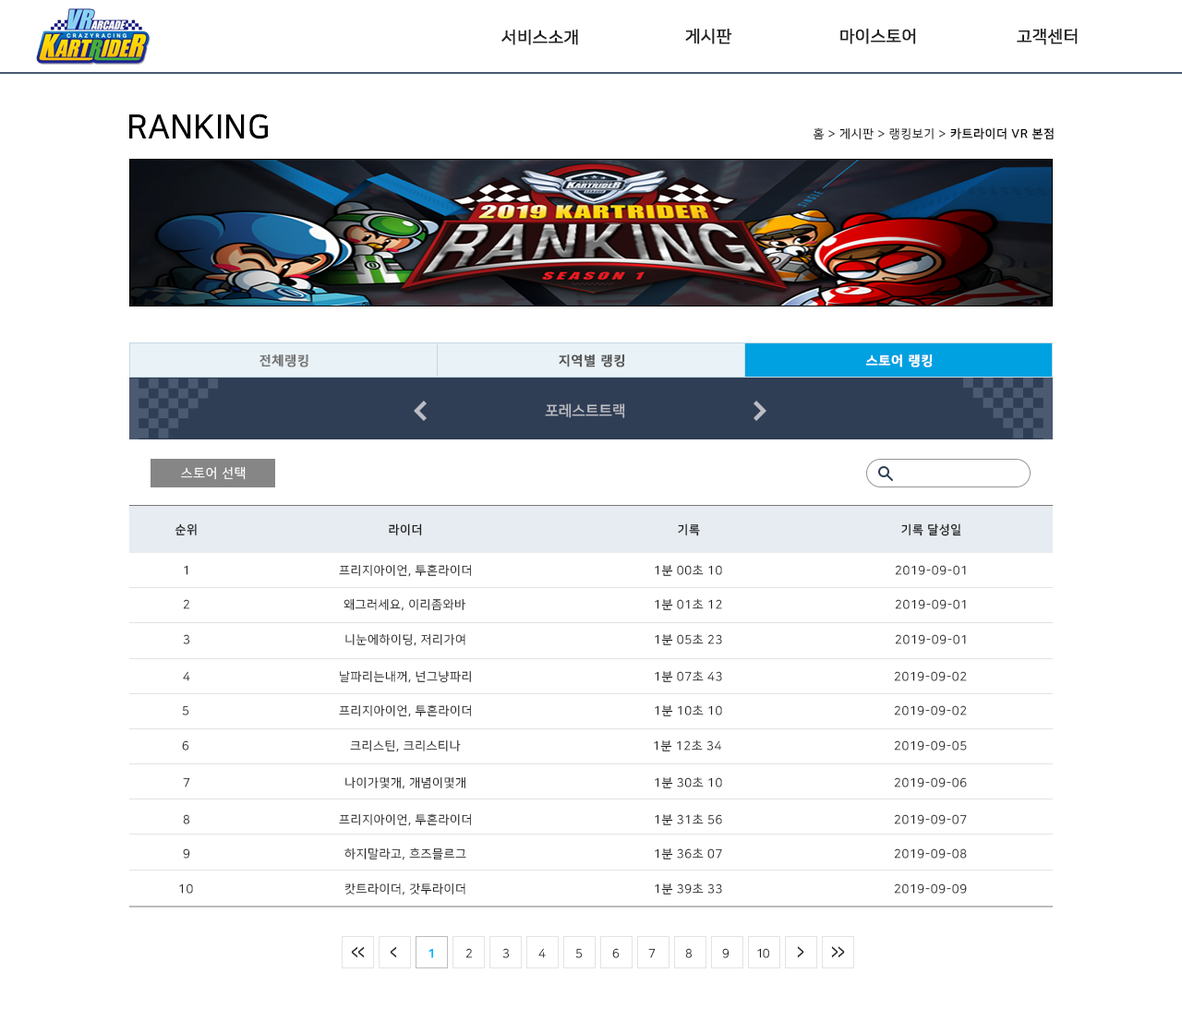
<style>
.page{position:relative;width:1182px;height:1009px;background:#ffffff}
.page>*{position:absolute;margin:0}
.t1{font:16.6px "NanumSquareR";color:#222222;font-weight:bold}
.t2{font:33.2px "NanumSquareB";color:#000000}
.t3{font:12px "NanumSquareR";letter-spacing:0.05em;color:#000000}
.t4{font:12px "NanumSquareB";letter-spacing:0.05em;color:#000000}
.t5{font:12.9px "NanumSquareB";letter-spacing:0.05em;color:#777777;font-weight:bold}
.t6{font:12.9px "NanumSquareB";letter-spacing:0.05em;color:#555555;font-weight:bold}
.t7{font:12.9px "NanumSquareB";letter-spacing:0.05em;color:#ffffff;font-weight:bold}
.t8{font:14.8px "NanumSquareB";color:#bcbcc4}
.t9{font:12.9px "NanumSquareR";letter-spacing:0.05em;color:#ffffff}
.t10{font:12px "NanumSquareB";letter-spacing:0.05em;color:#222222}
.t11{font:12px "NanumSquareR";letter-spacing:0.05em;color:#222222}
.t12{font:12px "NanumSquareR";letter-spacing:0.05em}
.t13{font:18.9px "NanumSquareB";letter-spacing:-0.075em;color:#222222;scale:0.63 1}
.t14{font:12px "NanumSquareB";letter-spacing:-0.075em;color:#00b6ff;font-weight:bold}
.t15{font:12px "NanumSquareR";letter-spacing:-0.075em}
.t16{font:12px "NanumSquareR";letter-spacing:-0.075em;color:#222222}
.t17{font:19.5px "NanumSquareB";letter-spacing:-0.075em;color:#222222;scale:0.61 1}
</style>
<div class="page">
<p class="t1" style="left:501px;top:29px;width:77px;height:16px">서비스소개</p>
<p class="t1" style="left:685px;top:28px;width:47px;height:16px">게시판</p>
<p class="t1" style="left:840px;top:28px;width:76px;height:16px">마이스토어</p>
<p class="t1" style="left:1016px;top:28px;width:61px;height:16px">고객센터</p>
<p class="t2" style="left:129px;top:114px;width:139px;height:25px">RANKING</p>
<p class="t3" style="left:812px;top:127px;width:241px;height:13px">홈 &gt; 게시판 &gt; 랭킹보기 &gt;<span class="t4"> 카트라이더 VR 본점</span></p>
<p class="t5" style="left:259px;top:354px;width:49px;height:13px">전체랭킹</p>
<p class="t6" style="left:559px;top:354px;width:66px;height:13px">지역별 랭킹</p>
<p class="t7" style="left:865px;top:354px;width:67px;height:13px">스토어 랭킹</p>
<p class="t8" style="left:545px;top:403px;width:80px;height:15px">포레스트트랙</p>
<p class="t9" style="left:181px;top:466px;width:65px;height:14px">스토어 선택</p>
<p class="t10" style="left:174px;top:523px;width:23px;height:12px">순위</p>
<p class="t10" style="left:389px;top:523px;width:33px;height:12px">라이더</p>
<p class="t10" style="left:678px;top:523px;width:22px;height:13px">기록</p>
<p class="t10" style="left:901px;top:523px;width:60px;height:13px">기록 달성일</p>
<p class="t11" style="left:184px;top:565px;width:4px;height:10px">1</p>
<p class="t11" style="left:339px;top:564px;width:132px;height:13px">프리지아이언, 투혼라이더</p>
<p class="t11" style="left:655px;top:564px;width:67px;height:12px">1분 00초 10</p>
<p class="t11" style="left:895px;top:565px;width:71px;height:10px">2019-09-01</p>
<p class="t12" style="left:183px;top:599px;width:7px;height:10px">2</p>
<p class="t11" style="left:343px;top:598px;width:122px;height:13px">왜그러세요, 이리좀와바</p>
<p class="t11" style="left:655px;top:598px;width:67px;height:12px">1분 01초 12</p>
<p class="t11" style="left:895px;top:599px;width:71px;height:10px">2019-09-01</p>
<p class="t11" style="left:183px;top:634px;width:7px;height:10px">3</p>
<p class="t11" style="left:345px;top:633px;width:120px;height:13px">니눈에하이딩, 저리가여</p>
<p class="t11" style="left:655px;top:633px;width:67px;height:12px">1분 05초 23</p>
<p class="t11" style="left:895px;top:634px;width:71px;height:10px">2019-09-01</p>
<p class="t12" style="left:183px;top:671px;width:7px;height:10px">4</p>
<p class="t11" style="left:340px;top:670px;width:131px;height:13px">날파리는내꺼, 넌그냥파리</p>
<p class="t11" style="left:655px;top:670px;width:67px;height:12px">1분 07초 43</p>
<p class="t11" style="left:894px;top:671px;width:73px;height:10px">2019-09-02</p>
<p class="t12" style="left:182px;top:705px;width:7px;height:10px">5</p>
<p class="t11" style="left:339px;top:704px;width:132px;height:13px">프리지아이언, 투혼라이더</p>
<p class="t11" style="left:655px;top:704px;width:67px;height:12px">1분 10초 10</p>
<p class="t11" style="left:894px;top:705px;width:73px;height:10px">2019-09-02</p>
<p class="t12" style="left:182px;top:740px;width:7px;height:11px">6</p>
<p class="t11" style="left:350px;top:739px;width:111px;height:13px">크리스틴, 크리스티나</p>
<p class="t11" style="left:654px;top:739px;width:68px;height:12px">1분 12초 34</p>
<p class="t11" style="left:894px;top:740px;width:73px;height:11px">2019-09-05</p>
<p class="t11" style="left:183px;top:777px;width:7px;height:11px">7</p>
<p class="t11" style="left:345px;top:776px;width:120px;height:13px">나이가몇개, 개념이몇개</p>
<p class="t11" style="left:655px;top:776px;width:67px;height:12px">1분 30초 10</p>
<p class="t11" style="left:894px;top:777px;width:73px;height:11px">2019-09-06</p>
<p class="t12" style="left:183px;top:814px;width:7px;height:10px">8</p>
<p class="t11" style="left:339px;top:813px;width:132px;height:13px">프리지아이언, 투혼라이더</p>
<p class="t11" style="left:655px;top:813px;width:67px;height:12px">1분 31초 56</p>
<p class="t11" style="left:894px;top:814px;width:73px;height:10px">2019-09-07</p>
<p class="t11" style="left:183px;top:848px;width:7px;height:11px">9</p>
<p class="t11" style="left:344px;top:848px;width:122px;height:12px">하지말라고, 흐즈믈르그</p>
<p class="t11" style="left:655px;top:848px;width:67px;height:12px">1분 36초 07</p>
<p class="t11" style="left:894px;top:848px;width:73px;height:11px">2019-09-08</p>
<p class="t11" style="left:179px;top:884px;width:14px;height:10px">10</p>
<p class="t11" style="left:344px;top:883px;width:121px;height:13px">캇트라이더, 갓투라이더</p>
<p class="t11" style="left:655px;top:883px;width:67px;height:12px">1분 39초 33</p>
<p class="t11" style="left:894px;top:884px;width:73px;height:10px">2019-09-09</p>
<p class="t13" style="left:351px;top:946px;width:14px;height:12px">&lt;&lt;</p>
<p class="t13" style="left:390px;top:946px;width:7px;height:12px">&lt;</p>
<p class="t14" style="left:428px;top:948px;width:6px;height:10px">1</p>
<p class="t15" style="left:465px;top:948px;width:8px;height:10px">2</p>
<p class="t16" style="left:502px;top:948px;width:8px;height:10px">3</p>
<p class="t15" style="left:538px;top:948px;width:8px;height:10px">4</p>
<p class="t15" style="left:575px;top:948px;width:8px;height:10px">5</p>
<p class="t15" style="left:612px;top:948px;width:7px;height:10px">6</p>
<p class="t16" style="left:648px;top:948px;width:7px;height:10px">7</p>
<p class="t15" style="left:685px;top:948px;width:7px;height:10px">8</p>
<p class="t16" style="left:722px;top:948px;width:7px;height:10px">9</p>
<p class="t16" style="left:757px;top:948px;width:12px;height:10px">10</p>
<p class="t17" style="left:797px;top:946px;width:7px;height:12px;rotate:180deg">&lt;</p>
<p class="t17" style="left:831px;top:946px;width:14px;height:12px;rotate:180deg">&lt;&lt;</p>
</div>
